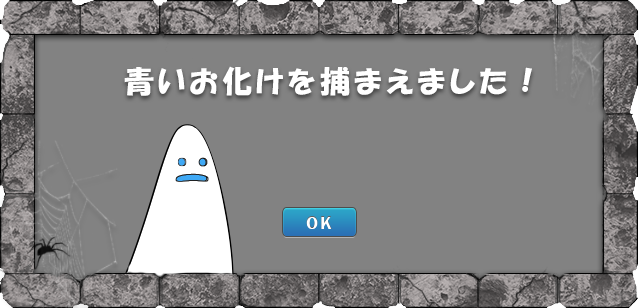
<style>
.page{position:relative;width:639px;height:308px;background:#828282}
.page>*{position:absolute;margin:0}
.t1{font:30px "HGPSoeiKakupoptai";letter-spacing:0.14em;color:#ffffff}
</style>
<div class="page">
<p class="t1" style="left:124px;top:66px;width:408px;height:30px">青いお化けを捕まえました！</p>
</div>
